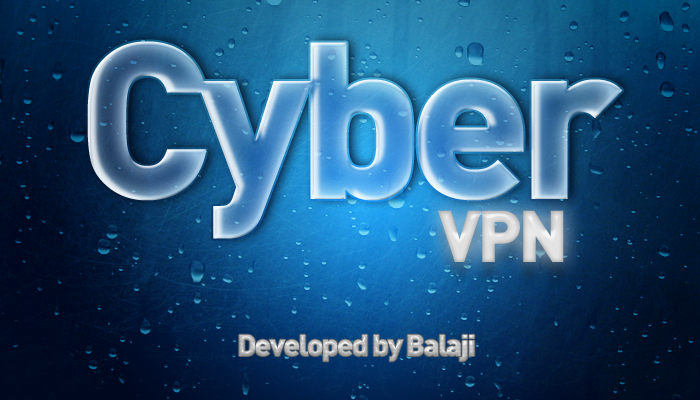
<style>
.page{position:relative;width:700px;height:400px}
.page>*{position:absolute;margin:0}
.t1{font:219.5px "DIN-Black";letter-spacing:-0.06em}
.t2{font:72px "DIN-Black";letter-spacing:-0.06em;color:#dcdcdc}
.t3{font:30px "DIN-Black";letter-spacing:-0.06em}
</style>
<div class="page">
<p class="t1" style="left:87px;top:41px;width:536px;height:198px">Cyber</p>
<p class="t2" style="left:438px;top:210px;width:126px;height:52px">VPN</p>
<p class="t3" style="left:239px;top:334px;width:236px;height:28px">Developed by Balaji</p>
</div>
